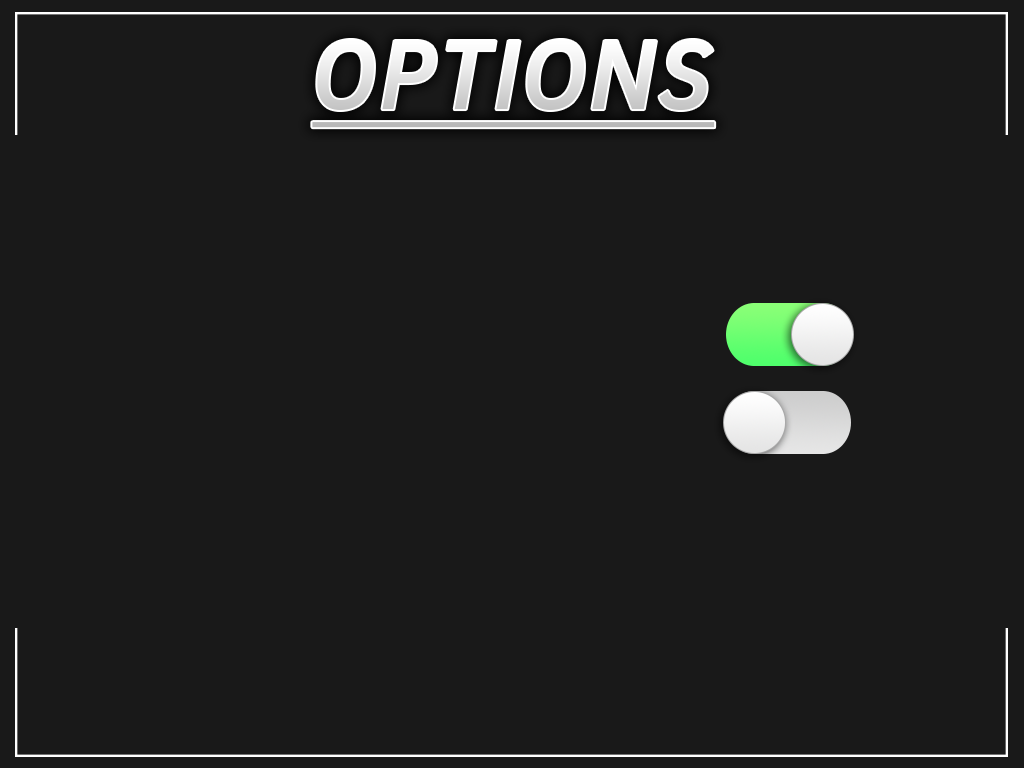
<style>
.page{position:relative;width:1024px;height:768px;background:#191919}
.page>*{position:absolute;margin:0}
.t1{font:101px "BrixSansMedium-Italic";letter-spacing:0.025em;text-decoration:underline}
</style>
<div class="page">
<p class="t1" style="left:312px;top:40px;width:403px;height:88px">OPTIONS</p>
</div>
